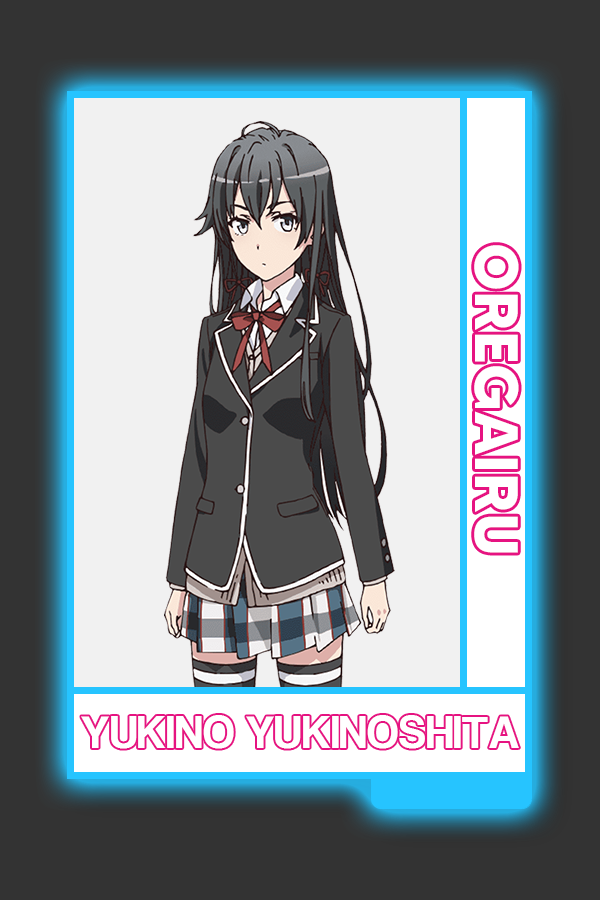
<style>
.page{position:relative;width:600px;height:900px;background:#f1f1f1}
.page>*{position:absolute;margin:0}
.t1{font:61.1px "MADETOMMY-Bold";color:#ffffff}
.t2{font:47.3px "CoolveticaRg-Regular";color:#ffffff}
</style>
<div class="page">
<p class="t1" style="left:474px;top:245px;width:45px;height:308px;rotate:90deg">OREGAIRU</p>
<p class="t2" style="left:81px;top:715px;width:438px;height:34px">YUKINO YUKINOSHITA</p>
</div>
